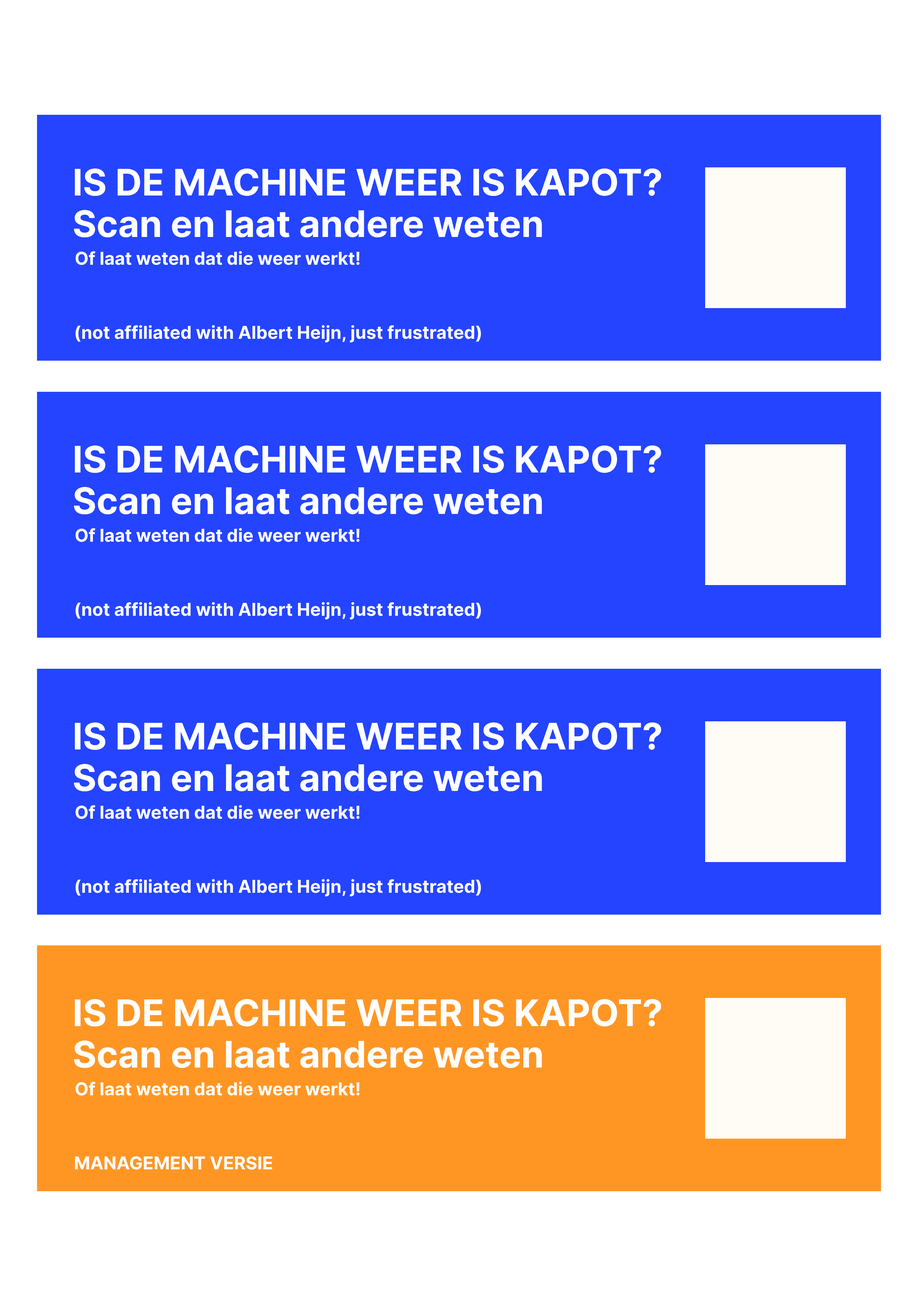
<style>
.page{position:relative;width:918px;height:1299px;background:#2444ff}
.page>*{position:absolute;margin:0}
.t1{font:36.7px "Inter-Bold";color:#ffffff}
.t2{font:17.8px "Inter-Bold";color:#ffffff}
</style>
<div class="page">
<p class="t1" style="left:75px;top:168px;width:587px;height:28px">IS DE MACHINE WEER IS KAPOT?</p>
<p class="t1" style="left:74px;top:210px;width:468px;height:27px">Scan en laat andere weten</p>
<p class="t2" style="left:76px;top:251px;width:284px;height:14px">Of laat weten dat die weer werkt!</p>
<p class="t2" style="left:76px;top:325px;width:405px;height:17px">(not affiliated with Albert Heijn, just frustrated)</p>
</div>
